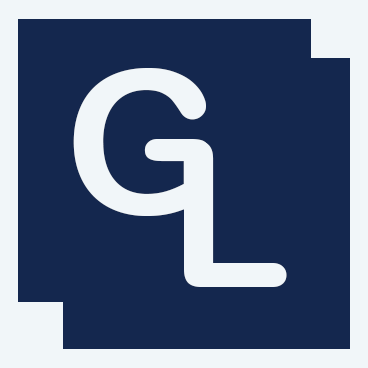
<style>
.page{position:relative;width:368px;height:368px;background:#14274e}
.page>*{position:absolute;margin:0}
.t1{font:200px "ArialRoundedMTBold";color:#f1f6f9}
</style>
<div class="page">
<p class="t1" style="left:73px;top:68px;width:138px;height:148px">G</p>
<p class="t1" style="left:184px;top:141px;width:103px;height:146px">L</p>
</div>
